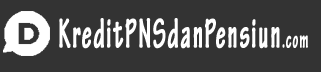
<style>
.page{position:relative;width:321px;height:72px;background:#333333}
.page>*{position:absolute;margin:0}
.t1{font:44.2px "TektonPro-BoldCond";letter-spacing:0.05em;color:#ffffff;font-weight:bold;scale:0.59 1}
.t2{font:25.2px "TektonPro-BoldCond";letter-spacing:0.05em;color:#ffffff;font-weight:bold;scale:0.59 1}
</style>
<div class="page">
<p class="t1" style="left:59px;top:18px;width:249px;height:31px">KreditPNSdanPensiun<span class="t2">.com</span></p>
</div>
